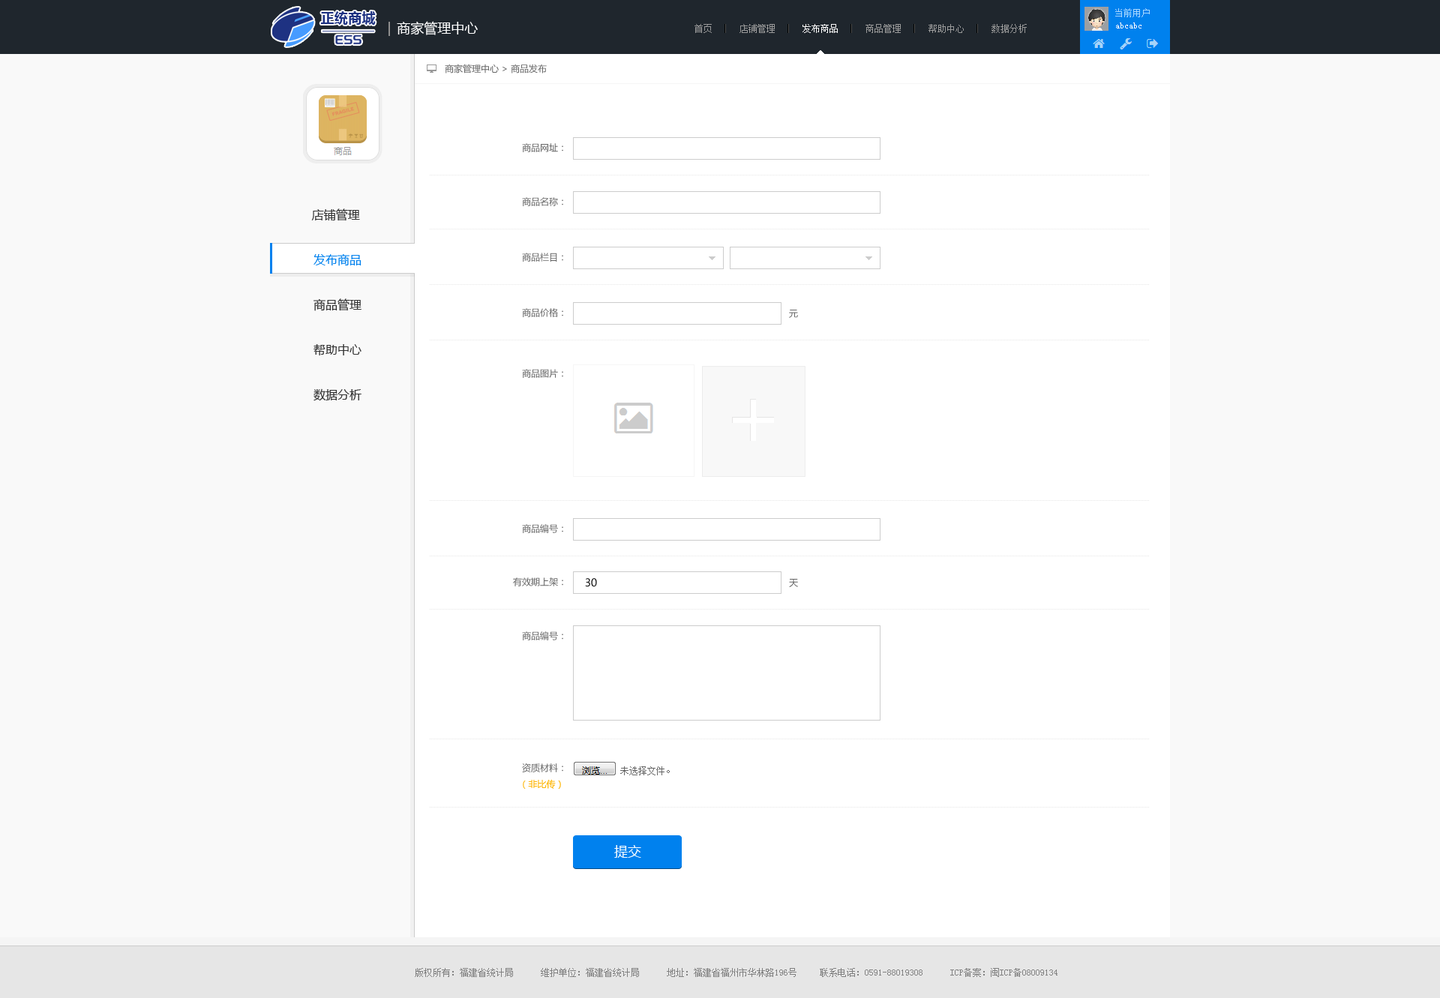
<style>
.page{position:relative;width:1440px;height:998px;background:#ffffff}
.page>*{position:absolute;margin:0}
.t1{font:13.5px "MicrosoftYaHei-Bold";letter-spacing:0.02em;color:#1e3282}
.t2{font:9px "SimSun";color:#aad8ff}
.t3{font:13.5px "MicrosoftYaHei";color:#ffffff}
.t4{font:9px "SimSun";color:#999999}
.t5{font:9px "SimSun";color:#ffffff}
.t6{font:9px "MicrosoftYaHei";color:#666666}
.t7{font:12px/45px "MicrosoftYaHei";color:#333333}
.t8{font:12px/45px "MicrosoftYaHei";color:#0081ee}
.t9{font:10.5px "MicrosoftYaHei";color:#000000}
.t10{font:9px "MicrosoftYaHei";color:#fdb400}
.t11{font:9px "SimSun";color:#818181}
</style>
<div class="page">
<p class="t1" style="left:320px;top:11px;width:56px;height:14px">正统商城</p>
<p class="t2" style="left:1115px;top:8px;width:35px;height:9px">当前用户</p>
<p class="t3" style="left:397px;top:21px;width:81px;height:14px">商家管理中心</p>
<p class="t4" style="left:694px;top:24px;width:333px;height:9px">首页      店铺管理      <span class="t5">发布商品      </span>商品管理      帮助中心      数据分析</p>
<p class="t5" style="left:1116px;top:22px;width:26px;height:6px">abcabc</p>
<p class="t6" style="left:522px;top:143px;width:41px;height:9px">商品网址：</p>
<p class="t6" style="left:522px;top:197px;width:41px;height:9px">商品名称：</p>
<p class="t7" style="left:311px;top:208px;width:51px;height:193px;text-align:center">店铺管理 <br><span class="t8">发布商品<br></span>商品管理<br>帮助中心<br>数据分析</p>
<p class="t6" style="left:522px;top:253px;width:41px;height:9px">商品栏目：</p>
<p class="t6" style="left:522px;top:308px;width:41px;height:9px">商品价格：</p>
<p class="t6" style="left:789px;top:310px;width:9px;height:8px">元</p>
<p class="t6" style="left:522px;top:369px;width:41px;height:9px">商品图片：</p>
<p class="t6" style="left:522px;top:524px;width:41px;height:9px">商品编号：</p>
<p class="t6" style="left:513px;top:578px;width:50px;height:8px">有效期上架：</p>
<p class="t9" style="left:585px;top:578px;width:12px;height:9px">30</p>
<p class="t6" style="left:789px;top:579px;width:9px;height:8px">天</p>
<p class="t6" style="left:522px;top:632px;width:41px;height:8px">商品编号：</p>
<p class="t6" style="left:522px;top:764px;width:41px;height:8px">资质材料：</p>
<p class="t10" style="left:523px;top:779px;width:38px;height:10px">（非比传）</p>
<p class="t3" style="left:614px;top:845px;width:27px;height:13px">提交</p>
<p class="t11" style="left:415px;top:968px;width:643px;height:9px">版权所有：福建省统计局      维护单位：福建省统计局      地址：福建省福州市华林路196号     联系电话：0591-88019308      ICP备案：闽ICP备08009134</p>
</div>
